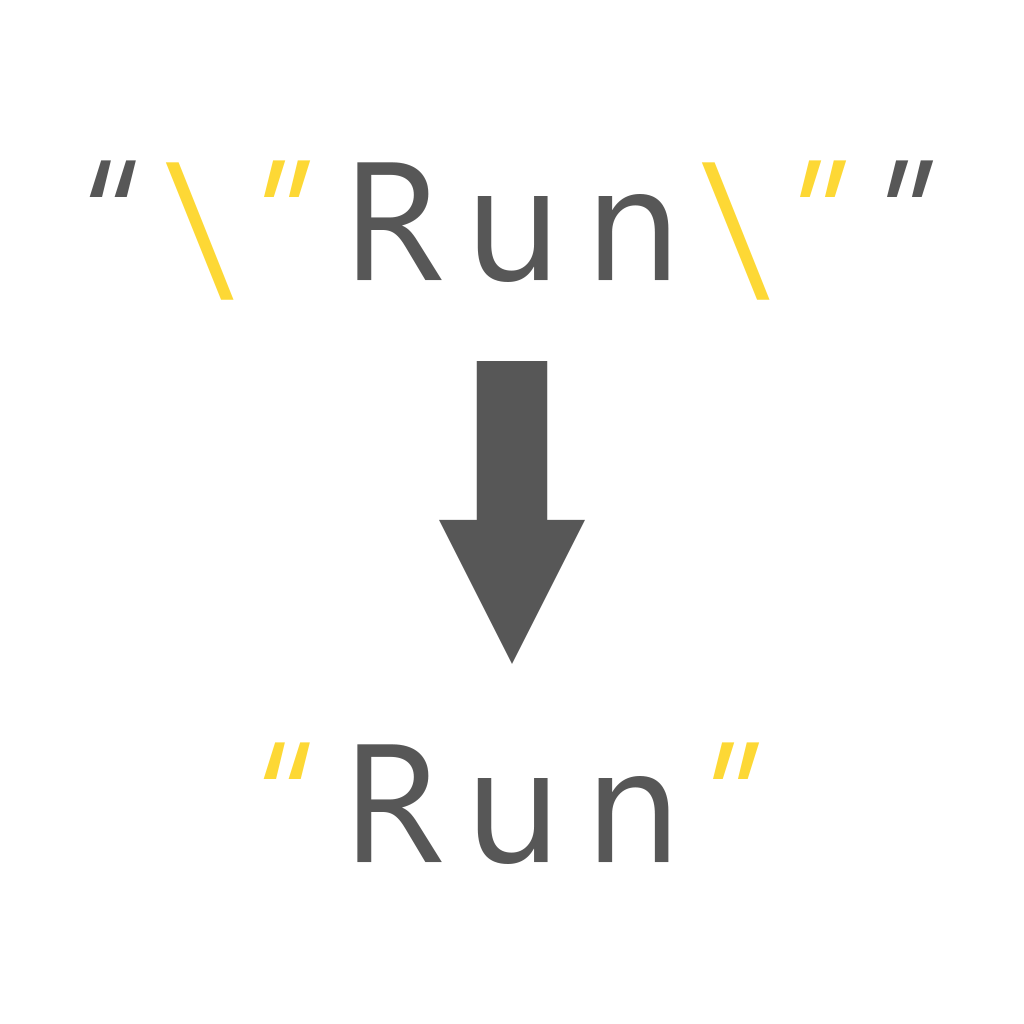
<style>
.page{position:relative;width:1024px;height:1024px;background:#ffffff}
.page>*{position:absolute;margin:0}
.t1{font:168.4px/291px "Ebrima";letter-spacing:0.14em;color:#575757}
.t2{font:168.4px/291px "Ebrima";letter-spacing:0.14em;color:#fdd835}
</style>
<div class="page">
<p class="t1" style="left:89px;top:160px;width:845px;height:704px;text-align:center">“<span class="t2">\”</span>Run<span class="t2">\”</span>”<br><br><span class="t2">“</span>Run<span class="t2">”</span></p>
</div>
